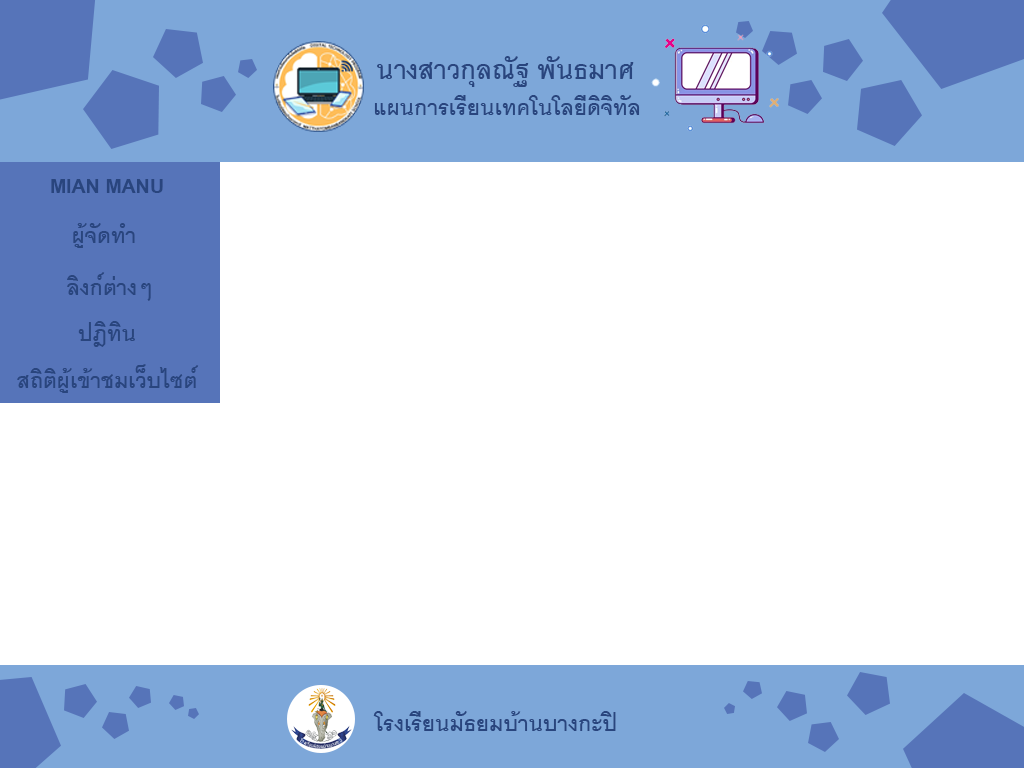
<style>
.page{position:relative;width:1024px;height:768px;background:#ffffff}
.page>*{position:absolute;margin:0}
.t1{font:36px "CordiaUPC-Bold";color:#29457e}
.t2{font:30px "CordiaUPC-Bold";color:#29457e}
.t3{font:30px "BrowalliaUPC-Bold";color:#29457e}
</style>
<div class="page">
<p class="t1" style="left:377px;top:56px;width:257px;height:31px">นางสาวกุลณัฐ พันธมาศ</p>
<p class="t2" style="left:374px;top:95px;width:266px;height:20px">แผนการเรียนเทคโนโลยีดิจิทัล</p>
<p class="t3" style="left:51px;top:179px;width:112px;height:14px">MIAN MANU</p>
<p class="t2" style="left:73px;top:223px;width:62px;height:25px">ผู้จัดทำ</p>
<p class="t2" style="left:67px;top:272px;width:84px;height:29px">ลิงก์ต่างๆ</p>
<p class="t2" style="left:78px;top:321px;width:57px;height:26px">ปฎิทิน</p>
<p class="t2" style="left:17px;top:364px;width:182px;height:29px">สถิติผู้เข้าชมเว็บไซต์</p>
<p class="t2" style="left:373px;top:711px;width:243px;height:20px">โรงเรียนมัธยมบ้านบางกะปิ</p>
</div>
